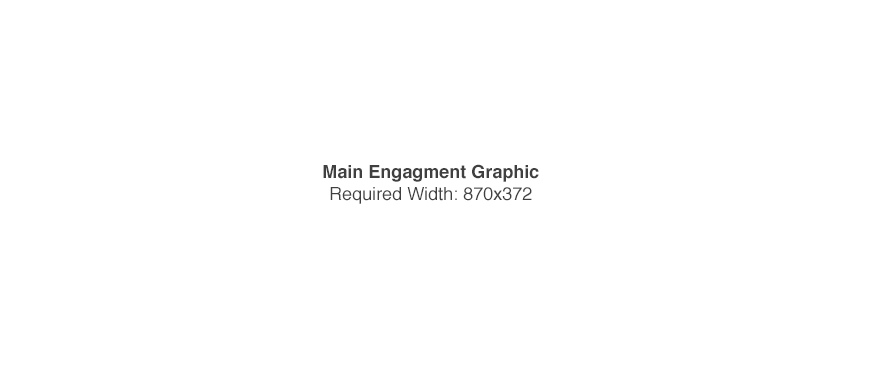
<style>
.page{position:relative;width:870px;height:372px;background:#ffffff}
.page>*{position:absolute;margin:0}
.t1{font:18px "Helvetica";color:#404040}
.t2{font:18px "Helvetica-Bold";color:#404040}
</style>
<div class="page">
<p class="t1" style="left:323px;top:164px;width:216px;height:40px;text-align:center"><span class="t2">Main Engagment Graphic<br></span>Required Width: 870x372</p>
</div>
